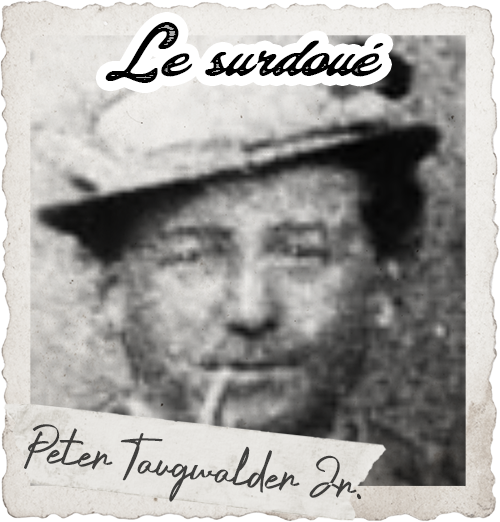
<style>
.page{position:relative;width:500px;height:522px}
.page>*{position:absolute;margin:0}
.t1{font:54.2px "ColinasPersonalUse-Regular";color:#000000}
.t2{font:54.2px "CrustaceansSignatureDEMO-Reg";color:#3f3e3d}
</style>
<div class="page">
<p class="t1" style="left:105px;top:22px;width:279px;height:61px">Le surdoué</p>
<p class="t2" style="left:24px;top:424px;width:337px;height:78px;rotate:6deg">Peter Taugwalder Jr.</p>
</div>
